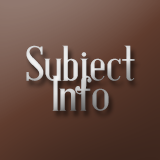
<style>
.page{position:relative;width:160px;height:160px}
.page>*{position:absolute;margin:0}
.t1{font:50px/30px "AntiqueBookCover"}
</style>
<div class="page">
<p class="t1" style="left:26px;top:45px;width:109px;height:66px;text-align:center">Subject<br>Info</p>
</div>
